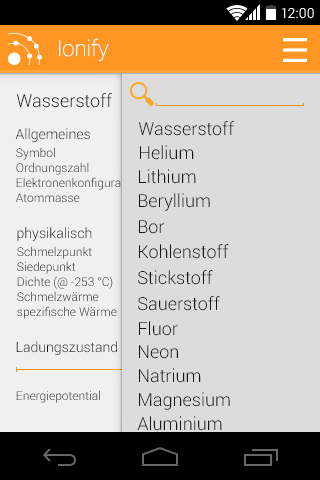
<style>
.page{position:relative;width:320px;height:480px;background:#dcdcdc}
.page>*{position:absolute;margin:0}
.t1{font:14px "Roboto-Regular";color:#ffffff}
.t2{font:22px "Roboto-Thin";color:#ffffff}
.t3{font:18px "Roboto-Light";color:#141414}
.t4{font:14px "Roboto-Light";color:#141414}
.t5{font:12px "Roboto-Light"}
</style>
<div class="page">
<p class="t1" style="left:282px;top:8px;width:32px;height:11px">12:00</p>
<p class="t2" style="left:59px;top:38px;width:50px;height:23px">Ionify</p>
<p class="t3" style="left:17px;top:93px;width:95px;height:15px">Wasserstoff</p>
<p class="t3" style="left:139px;top:121px;width:95px;height:15px">Wasserstoff</p>
<p class="t4" style="left:15px;top:128px;width:75px;height:14px">Allgemeines</p>
<p class="t5" style="left:16px;top:147px;width:187px;height:13px">Symbol    H</p>
<p class="t3" style="left:140px;top:145px;width:54px;height:15px">Helium</p>
<p class="t5" style="left:16px;top:162px;width:184px;height:13px">Ordnungszahl   1</p>
<p class="t3" style="left:139px;top:169px;width:57px;height:15px">Lithium</p>
<p class="t5" style="left:16px;top:177px;width:192px;height:13px">Elektronenkonfiguration  1s</p>
<p class="t5" style="left:16px;top:193px;width:223px;height:9px">Atommasse    1.00794</p>
<p class="t3" style="left:139px;top:193px;width:71px;height:18px">Beryllium</p>
<p class="t3" style="left:139px;top:220px;width:26px;height:14px">Bor</p>
<p class="t4" style="left:17px;top:227px;width:75px;height:14px">physikalisch</p>
<p class="t3" style="left:139px;top:244px;width:90px;height:15px">Kohlenstoff</p>
<p class="t5" style="left:17px;top:261px;width:224px;height:13px">Siedepunkt    20.28 °K</p>
<p class="t3" style="left:138px;top:270px;width:75px;height:15px">Stickstoff</p>
<p class="t5" style="left:17px;top:291px;width:249px;height:11px">Schmelzwärme    0.117 kJ/mol</p>
<p class="t3" style="left:138px;top:296px;width:82px;height:15px">Sauerstoff</p>
<p class="t5" style="left:17px;top:306px;width:256px;height:13px">spezifische Wärme   14.267 kJ/mol</p>
<p class="t3" style="left:139px;top:321px;width:39px;height:15px">Fluor</p>
<p class="t4" style="left:16px;top:341px;width:101px;height:14px">Ladungszustand</p>
<p class="t3" style="left:139px;top:345px;width:39px;height:14px">Neon</p>
<p class="t3" style="left:139px;top:368px;width:62px;height:15px">Natrium</p>
<p class="t5" style="left:16px;top:390px;width:210px;height:13px">Energiepotential   14 eV</p>
<p class="t3" style="left:139px;top:392px;width:91px;height:18px">Magnesium</p>
<p class="t3" style="left:137px;top:416px;width:85px;height:15px">Aluminium</p>
</div>
